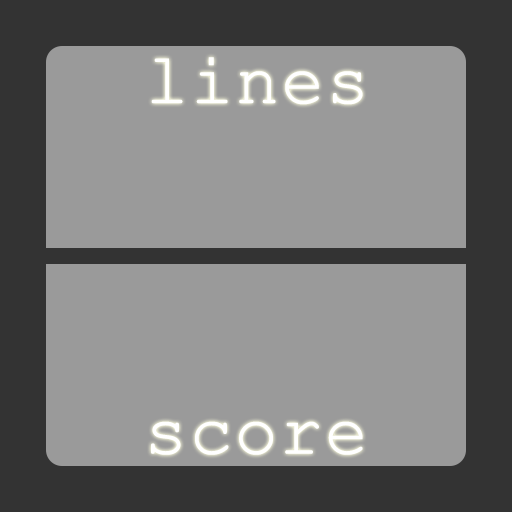
<style>
.page{position:relative;width:512px;height:512px;background:#9a9a9a}
.page>*{position:absolute;margin:0}
.t1{font:72px "CourierNewPSMT";color:#ffffff;font-weight:bold}
</style>
<div class="page">
<p class="t1" style="left:151px;top:57px;width:212px;height:48px">lines</p>
<p class="t1" style="left:151px;top:421px;width:212px;height:34px">score</p>
</div>
